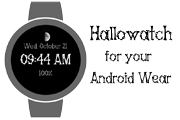
<style>
.page{position:relative;width:180px;height:120px;background:#ffffff}
.page>*{position:absolute;margin:0}
.t1{font:18px "Bones-Regular";color:#000000}
.t2{font:14px "Bones-Regular";color:#000000}
</style>
<div class="page">
<p class="t1" style="left:90px;top:25px;width:83px;height:16px">Hallowatch</p>
<p class="t2" style="left:105px;top:50px;width:47px;height:14px">for your</p>
<p class="t2" style="left:90px;top:71px;width:82px;height:13px">Android Wear</p>
</div>
